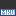
<style>
.page{position:relative;width:16px;height:16px;background:#333333}
.page>*{position:absolute;margin:0}
.t1{font:8px "Pixelated";color:#ffffff;text-transform:uppercase}
</style>
<div class="page">
<p class="t1" style="left:1px;top:10px;width:13px;height:5px">MKV</p>
</div>
